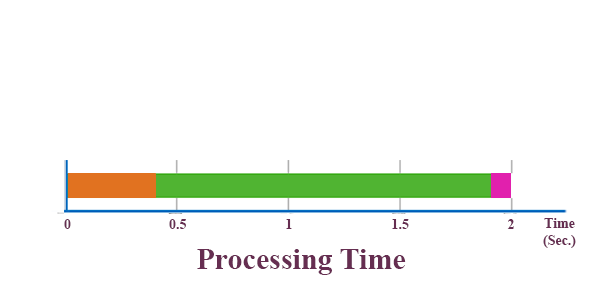
<style>
.page{position:relative;width:600px;height:300px;background:#ffffff}
.page>*{position:absolute;margin:0}
.t1{font:14px "TimesNewRomanPS-BoldMT";color:#662e51}
.t2{font:30px "TimesNewRomanPS-BoldMT";color:#662e51}
</style>
<div class="page">
<p class="t1" style="left:64px;top:219px;width:7px;height:10px">0</p>
<p class="t1" style="left:169px;top:219px;width:17px;height:10px">0.5</p>
<p class="t1" style="left:286px;top:219px;width:6px;height:10px">1</p>
<p class="t1" style="left:392px;top:219px;width:17px;height:10px">1.5</p>
<p class="t1" style="left:507px;top:219px;width:7px;height:10px">2</p>
<p class="t1" style="left:543px;top:218px;width:33px;height:30px;text-align:center">Time<br>(Sec.)</p>
<p class="t2" style="left:197px;top:249px;width:209px;height:26px">Processing Time</p>
</div>
